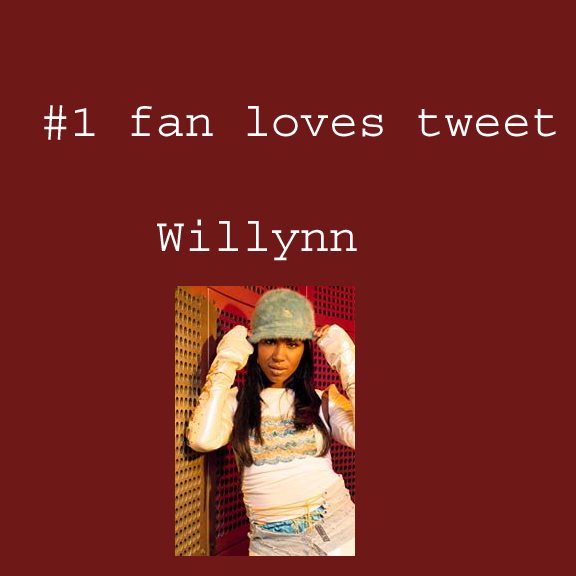
<style>
.page{position:relative;width:576px;height:576px;background:#6e1818}
.page>*{position:absolute;margin:0}
.t1{font:48px "Courier";color:#ffffff}
</style>
<div class="page">
<p class="t1" style="left:44px;top:105px;width:512px;height:156px">#1 fan loves tweet<br><br>    Willynn</p>
</div>
